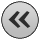
<style>
.page{position:relative;width:40px;height:40px;background:#ffffff}
.page>*{position:absolute;margin:0}
.t1{font:46.7px "StoneSansSemITCTTSemi";letter-spacing:-0.025em;color:#2d2d2d}
</style>
<div class="page">
<p class="t1" style="left:8px;top:11px;width:23px;height:17px">«</p>
</div>
